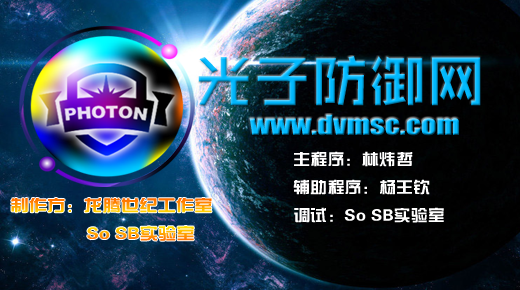
<style>
.page{position:relative;width:520px;height:290px}
.page>*{position:absolute;margin:0}
.t1{font:59.7px "ZHSRXT--GBK1-0"}
.t2{font:25.4px "Impact";scale:1.21 1}
.t3{font:16px "FZZYJW--GB1-0";color:#ffffff;scale:1.07 1}
.t4{font:16px "FZZYJW--GB1-0";scale:1.15 1}
</style>
<div class="page">
<p class="t1" style="left:198px;top:56px;width:283px;height:50px">光子防御网</p>
<p class="t2" style="left:249px;top:114px;width:210px;height:22px">www.dvmsc.com</p>
<p class="t3" style="left:293px;top:151px;width:151px;height:72px">主程序：林炜哲<br>辅助程序：杨王钦<br>调试：So SB实验室</p>
<p class="t4" style="left:11px;top:198px;width:201px;height:43px">制作方：龙腾世纪工作室<br>               So SB实验室</p>
</div>
